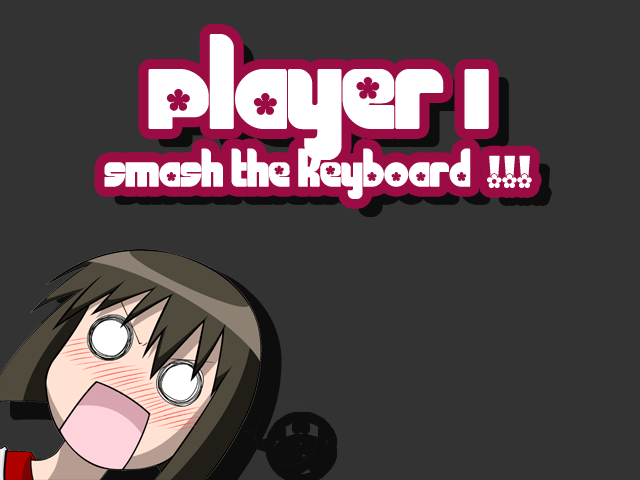
<style>
.page{position:relative;width:640px;height:480px;background:#333333}
.page>*{position:absolute;margin:0}
.t1{font:48px "Chick";color:#ffffff}
.t2{font:120px "Chick";color:#ffffff}
</style>
<div class="page">
<p class="t1" style="left:104px;top:34px;width:428px;height:165px;text-align:center"><span class="t2">Player 1</span><br>smash the keyboard  !!!</p>
</div>
